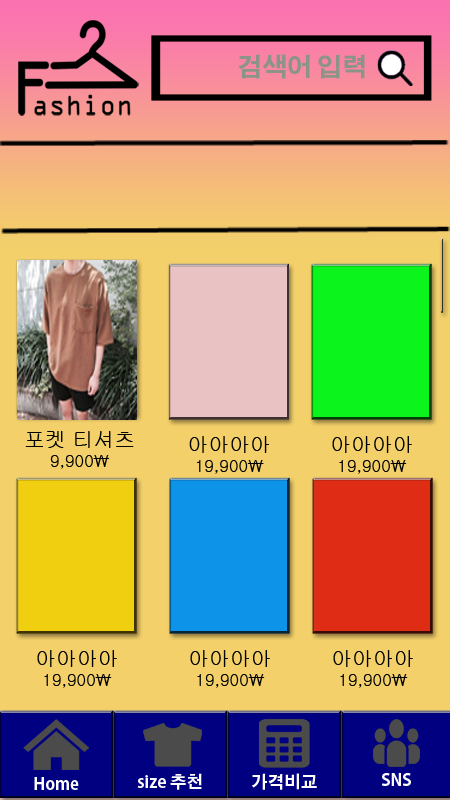
<style>
.page{position:relative;width:450px;height:800px;background:#f3d06a}
.page>*{position:absolute;margin:0}
.t1{font:25px "AdobeGothicStd-Bold";color:#8c9488}
.t2{font:20.8px "Gulim";color:#010200}
.t3{font:16.7px "Gulim";color:#010200}
.t4{font:16.7px "AdobeGothicStd-Bold";color:#fefefe}
</style>
<div class="page">
<p class="t1" style="left:238px;top:54px;width:127px;height:25px">검색어 입력</p>
<p class="t2" style="left:25px;top:431px;width:109px;height:38px;text-align:center">포켓 티셔츠<br><span class="t3">9,900\</span></p>
<p class="t3" style="left:189px;top:436px;width:80px;height:38px;text-align:center"><span class="t2">아아아아<br></span>19,900\</p>
<p class="t3" style="left:332px;top:436px;width:80px;height:38px;text-align:center"><span class="t2">아아아아<br></span>19,900\</p>
<p class="t3" style="left:37px;top:650px;width:80px;height:38px;text-align:center"><span class="t2">아아아아<br></span>19,900\</p>
<p class="t3" style="left:190px;top:650px;width:80px;height:38px;text-align:center"><span class="t2">아아아아<br></span>19,900\</p>
<p class="t3" style="left:333px;top:650px;width:80px;height:38px;text-align:center"><span class="t2">아아아아<br></span>19,900\</p>
<p class="t4" style="left:137px;top:773px;width:65px;height:17px">size 추천</p>
<p class="t4" style="left:251px;top:773px;width:66px;height:17px">가격비교</p>
<p class="t4" style="left:381px;top:773px;width:30px;height:13px">SNS</p>
<p class="t4" style="left:34px;top:777px;width:45px;height:13px">Home</p>
</div>
